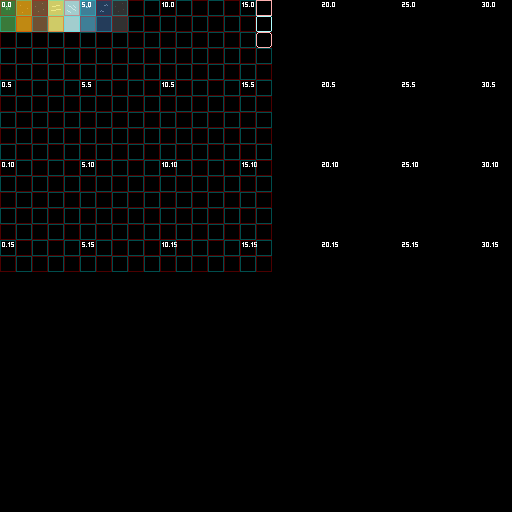
<style>
.page{position:relative;width:512px;height:512px;background:#000000}
.page>*{position:absolute;margin:0}
.t1{font:8px "PixelMillennium";color:#ffffff;text-transform:uppercase}
</style>
<div class="page">
<p class="t1" style="left:2px;top:2px;width:9px;height:5px">0.0</p>
<p class="t1" style="left:82px;top:2px;width:9px;height:5px">5.0</p>
<p class="t1" style="left:162px;top:2px;width:12px;height:5px">10.0</p>
<p class="t1" style="left:242px;top:2px;width:12px;height:5px">15.0</p>
<p class="t1" style="left:322px;top:2px;width:13px;height:5px">20.0</p>
<p class="t1" style="left:402px;top:2px;width:13px;height:5px">25.0</p>
<p class="t1" style="left:482px;top:2px;width:13px;height:5px">30.0</p>
<p class="t1" style="left:2px;top:82px;width:9px;height:5px">0.5</p>
<p class="t1" style="left:82px;top:82px;width:9px;height:5px">5.5</p>
<p class="t1" style="left:162px;top:82px;width:12px;height:5px">10.5</p>
<p class="t1" style="left:242px;top:82px;width:12px;height:5px">15.5</p>
<p class="t1" style="left:322px;top:82px;width:13px;height:5px">20.5</p>
<p class="t1" style="left:402px;top:82px;width:13px;height:5px">25.5</p>
<p class="t1" style="left:482px;top:82px;width:13px;height:5px">30.5</p>
<p class="t1" style="left:2px;top:162px;width:12px;height:5px">0.10</p>
<p class="t1" style="left:82px;top:162px;width:12px;height:5px">5.10</p>
<p class="t1" style="left:162px;top:162px;width:15px;height:5px">10.10</p>
<p class="t1" style="left:242px;top:162px;width:15px;height:5px">15.10</p>
<p class="t1" style="left:322px;top:162px;width:16px;height:5px">20.10</p>
<p class="t1" style="left:402px;top:162px;width:16px;height:5px">25.10</p>
<p class="t1" style="left:482px;top:162px;width:16px;height:5px">30.10</p>
<p class="t1" style="left:2px;top:242px;width:12px;height:5px">0.15</p>
<p class="t1" style="left:82px;top:242px;width:12px;height:5px">5.15</p>
<p class="t1" style="left:162px;top:242px;width:15px;height:5px">10.15</p>
<p class="t1" style="left:242px;top:242px;width:15px;height:5px">15.15</p>
<p class="t1" style="left:322px;top:242px;width:16px;height:5px">20.15</p>
<p class="t1" style="left:402px;top:242px;width:16px;height:5px">25.15</p>
<p class="t1" style="left:482px;top:242px;width:16px;height:5px">30.15</p>
</div>
